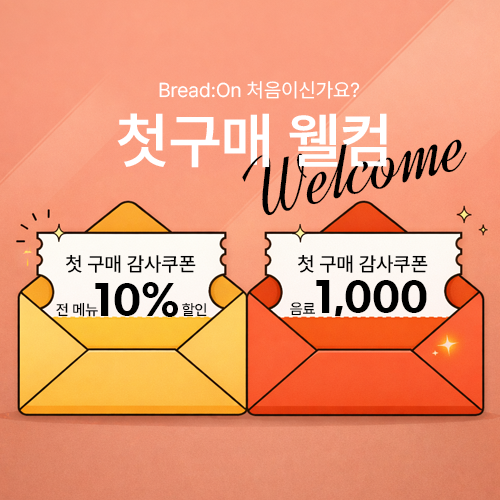
<style>
.page{position:relative;width:500px;height:500px}
.page>*{position:absolute;margin:0}
.t1{font:20px "Pretendard-Regular";color:#ffffff}
.t2{font:60.6px "Pretendard-SemiBold";color:#ffffff}
.t3{font:85.1px "Dynalight-Regular";color:#000000}
.t4{font:20px "Pretendard-Medium";color:#000000}
.t5{font:40px "GmarketSansTTFBold";color:#000000}
.t6{font:15px "Pretendard-Medium";color:#000000}
</style>
<div class="page">
<p class="t1" style="left:159px;top:81px;width:201px;height:18px">Bread:On 처음이신가요?</p>
<p class="t2" style="left:117px;top:113px;width:270px;height:55px">첫구매 웰컴</p>
<p class="t3" style="left:242px;top:139px;width:225px;height:77px;rotate:-13deg">Welcome</p>
<p class="t4" style="left:66px;top:254px;width:130px;height:19px">첫 구매 감사쿠폰</p>
<p class="t4" style="left:298px;top:254px;width:130px;height:19px">첫 구매 감사쿠폰</p>
<p class="t5" style="left:316px;top:280px;width:111px;height:36px">1,000</p>
<p class="t5" style="left:95px;top:282px;width:83px;height:35px">10%</p>
<p class="t6" style="left:56px;top:302px;width:42px;height:15px">전 메뉴</p>
<p class="t6" style="left:182px;top:303px;width:25px;height:14px">할인</p>
<p class="t6" style="left:290px;top:302px;width:25px;height:14px">음료</p>
</div>
